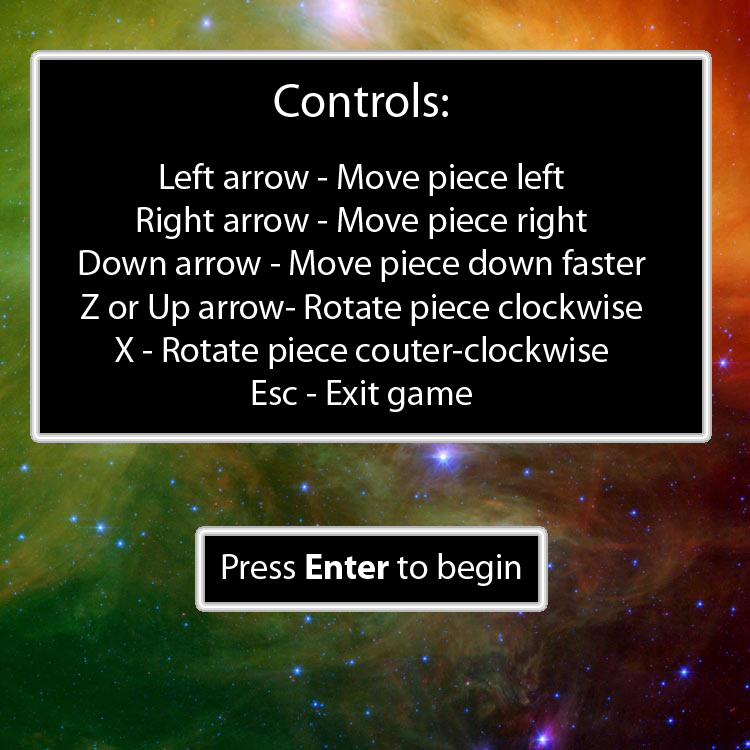
<style>
.page{position:relative;width:750px;height:750px;background:#000000}
.page>*{position:absolute;margin:0}
.t1{font:36px "MyriadPro-Regular";color:#ffffff}
.t2{font:48px "MyriadPro-Regular";color:#ffffff}
.t3{font:36px "MyriadPro-Bold";color:#ffffff}
</style>
<div class="page">
<p class="t1" style="left:79px;top:82px;width:567px;height:330px;text-align:center"><span class="t2">Controls:<br> <br></span>Left arrow - Move piece left<br>Right arrow - Move piece right<br>Down arrow - Move piece down faster<br>Z or Up arrow- Rotate piece clockwise<br>X - Rotate piece couter-clockwise<br>Esc - Exit game</p>
<p class="t1" style="left:222px;top:553px;width:299px;height:33px">Press <span class="t3">Enter</span> to begin</p>
</div>
